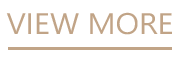
<style>
.page{position:relative;width:186px;height:64px;background:#ffffff}
.page>*{position:absolute;margin:0}
.t1{font:29.6px "YuGothicUI-Regular";color:#c1a487;scale:1.05 1}
</style>
<div class="page">
<p class="t1" style="left:6px;top:12px;width:166px;height:23px">VIEW MORE</p>
</div>
